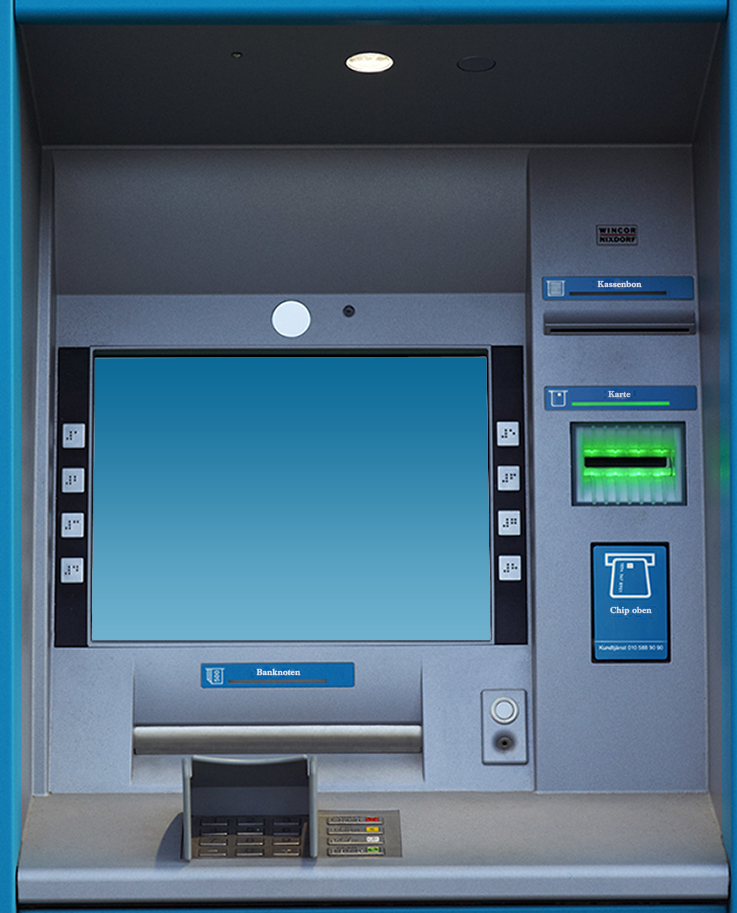
<style>
.page{position:relative;width:737px;height:913px}
.page>*{position:absolute;margin:0}
.t1{font:9px "URWImprintW01-Bold";color:#d6dbe5}
.t2{font:9px "URWImprintW01-Bold";color:#cbd3df}
.t3{font:9px "URWImprintW01-Bold";color:#d4dee9}
.t4{font:9px "URWImprintW01-Bold";color:#dce4ee}
</style>
<div class="page">
<p class="t1" style="left:597px;top:280px;width:45px;height:8px">Kassenbon</p>
<p class="t2" style="left:608px;top:390px;width:23px;height:8px">Karte</p>
<p class="t3" style="left:610px;top:606px;width:42px;height:10px">Chip oben</p>
<p class="t4" style="left:256px;top:668px;width:45px;height:8px">Banknoten</p>
</div>
